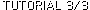
<style>
.page{position:relative;width:90px;height:10px;background:#ffffff}
.page>*{position:absolute;margin:0}
.t1{font:12px "Geneva";color:#000000}
</style>
<div class="page">
<p class="t1" style="left:3px;top:1px;width:85px;height:9px">TUTORIAL 3/3</p>
</div>
